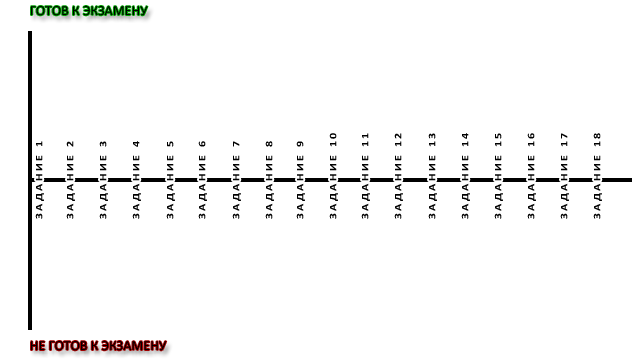
<style>
.page{position:relative;width:640px;height:360px;background:#ffffff}
.page>*{position:absolute;margin:0}
.t1{font:14px "Calibri";color:#000000;text-transform:uppercase}
.t2{font:10px "Calibri-Bold";letter-spacing:0.2em;color:#000000;text-transform:uppercase;scale:1.2 1}
</style>
<div class="page">
<p class="t1" style="left:31px;top:6px;width:117px;height:10px">готов к экзамену</p>
<p class="t2" style="left:329px;top:133px;width:9px;height:86px;rotate:-90deg">задание 10</p>
<p class="t2" style="left:361px;top:133px;width:9px;height:86px;rotate:-90deg">задание 11</p>
<p class="t2" style="left:394px;top:133px;width:9px;height:86px;rotate:-90deg">задание 12</p>
<p class="t2" style="left:428px;top:133px;width:9px;height:86px;rotate:-90deg">задание 13</p>
<p class="t2" style="left:461px;top:133px;width:9px;height:86px;rotate:-90deg">задание 14</p>
<p class="t2" style="left:494px;top:133px;width:9px;height:86px;rotate:-90deg">задание 15</p>
<p class="t2" style="left:527px;top:133px;width:9px;height:86px;rotate:-90deg">задание 16</p>
<p class="t2" style="left:560px;top:133px;width:9px;height:86px;rotate:-90deg">задание 17</p>
<p class="t2" style="left:593px;top:133px;width:9px;height:86px;rotate:-90deg">задание 18</p>
<p class="t2" style="left:35px;top:141px;width:9px;height:78px;rotate:-90deg">задание 1</p>
<p class="t2" style="left:66px;top:141px;width:9px;height:78px;rotate:-90deg">задание 2</p>
<p class="t2" style="left:99px;top:141px;width:9px;height:78px;rotate:-90deg">задание 3</p>
<p class="t2" style="left:132px;top:141px;width:9px;height:78px;rotate:-90deg">задание 4</p>
<p class="t2" style="left:166px;top:141px;width:9px;height:78px;rotate:-90deg">задание 5</p>
<p class="t2" style="left:198px;top:141px;width:9px;height:78px;rotate:-90deg">задание 6</p>
<p class="t2" style="left:232px;top:141px;width:9px;height:78px;rotate:-90deg">задание 7</p>
<p class="t2" style="left:265px;top:141px;width:9px;height:78px;rotate:-90deg">задание 8</p>
<p class="t2" style="left:296px;top:141px;width:9px;height:78px;rotate:-90deg">задание 9</p>
<p class="t1" style="left:31px;top:341px;width:136px;height:10px">не готов к экзамену</p>
</div>
